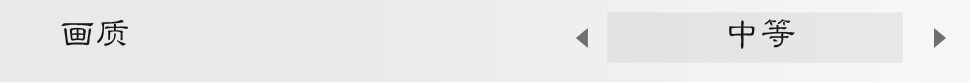
<style>
.page{position:relative;width:971px;height:83px;background:#e9e9e9}
.page>*{position:absolute;margin:0}
.t1{font:36px "FZLBJW--GB1-0";color:#000000}
</style>
<div class="page">
<p class="t1" style="left:61px;top:19px;width:68px;height:27px;opacity:0.9">画质</p>
<p class="t1" style="left:729px;top:19px;width:66px;height:30px;opacity:0.9">中等</p>
</div>
